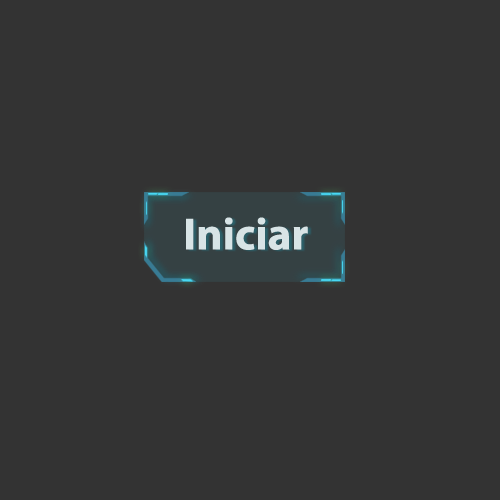
<style>
.page{position:relative;width:500px;height:500px;background:#333333}
.page>*{position:absolute;margin:0}
.t1{font:45.5px "MyriadPro-Bold";color:#d8e4e6}
</style>
<div class="page">
<p class="t1" style="left:186px;top:217px;width:122px;height:33px">Iniciar</p>
</div>
